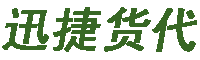
<style>
.page{position:relative;width:200px;height:60px;background:#ffffff}
.page>*{position:absolute;margin:0}
.t1{font:48px "SimHei";color:#386825;font-weight:bold;font-style:italic}
</style>
<div class="page">
<p class="t1" style="left:2px;top:7px;width:195px;height:45px">迅捷货代</p>
</div>
